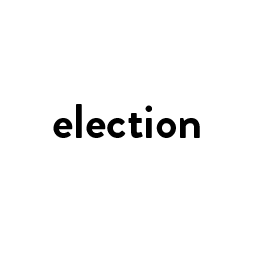
<style>
.page{position:relative;width:256px;height:256px;background:#ffffff}
.page>*{position:absolute;margin:0}
.t1{font:48px "BrandonGrotesque-Bold";color:#000000}
</style>
<div class="page">
<p class="t1" style="left:53px;top:104px;width:147px;height:34px">election</p>
</div>
